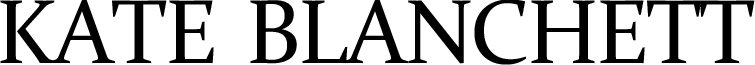
<style>
.page{position:relative;width:755px;height:65px;background:#ffffff}
.page>*{position:absolute;margin:0}
.t1{font:91.5px "Constantia";letter-spacing:-0.03em;color:#000000}
</style>
<div class="page">
<p class="t1" style="left:0px;top:0px;width:755px;height:65px">KATE  BLANCHETT</p>
</div>
